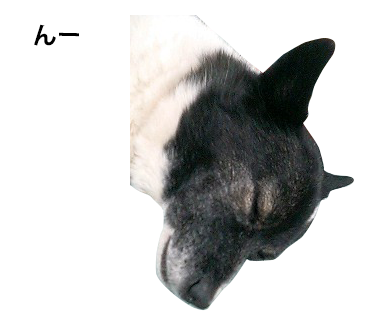
<style>
.page{position:relative;width:370px;height:320px;background:#ffffff}
.page>*{position:absolute;margin:0}
.t1{font:24px "KozGoPr6N-Bold";color:#000000}
</style>
<div class="page">
<p class="t1" style="left:34px;top:24px;width:45px;height:22px">んー</p>
</div>
